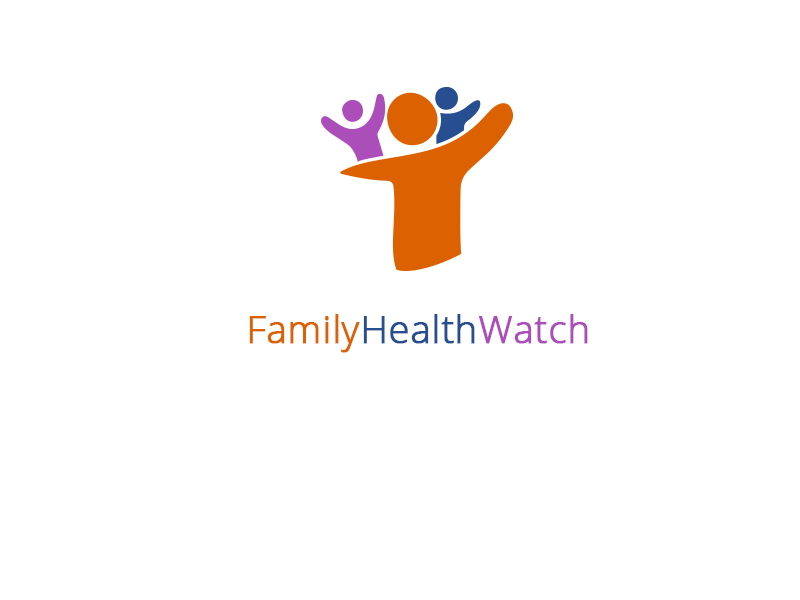
<style>
.page{position:relative;width:800px;height:600px;background:#ffffff}
.page>*{position:absolute;margin:0}
.t1{font:38px "OpenSans-Light";color:#dc6100;font-weight:bold}
.t2{font:38px "OpenSans-Light";color:#274e91;font-weight:bold}
.t3{font:38px "OpenSans-Light";color:#ac4eba;font-weight:bold}
</style>
<div class="page">
<p class="t1" style="left:249px;top:314px;width:339px;height:39px">Family<span class="t2">Health</span><span class="t3">Watch</span></p>
</div>
